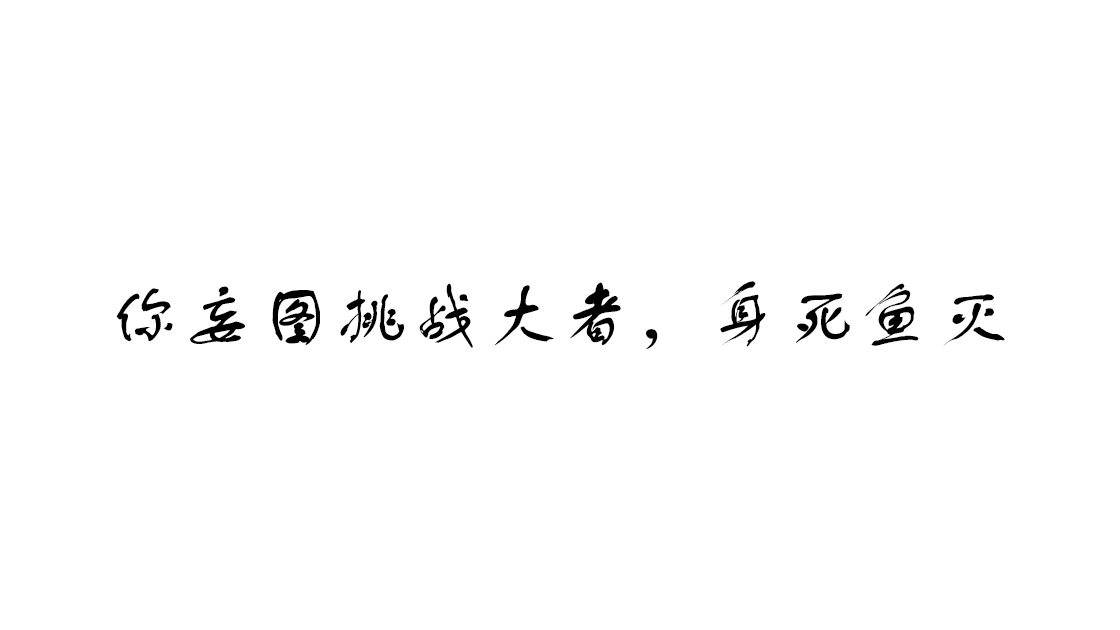
<style>
.page{position:relative;width:1120px;height:630px;background:#ffffff}
.page>*{position:absolute;margin:0}
.t1{font:75px "FZSTK--GBK1-0";color:#000000}
</style>
<div class="page">
<p class="t1" style="left:116px;top:281px;width:889px;height:68px">你妄图挑战大者，身死鱼灭</p>
</div>
